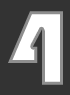
<style>
.page{position:relative;width:70px;height:95px;background:#333333}
.page>*{position:absolute;margin:0}
.t1{font:110px "Bauhaus93";letter-spacing:0.2em;color:#ffffff}
</style>
<div class="page">
<p class="t1" style="left:8px;top:11px;width:55px;height:74px">4</p>
</div>
